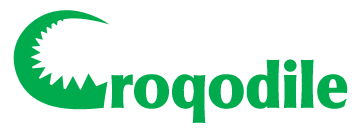
<style>
.page{position:relative;width:357px;height:130px;background:#ffffff}
.page>*{position:absolute;margin:0}
.t1{font:60px "FerruleDisplaySSi";color:#00ab4e}
</style>
<div class="page">
<p class="t1" style="left:111px;top:59px;width:237px;height:64px">roqodile</p>
</div>
